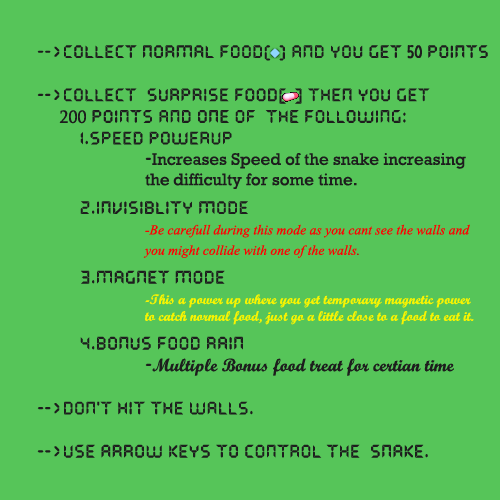
<style>
.page{position:relative;width:500px;height:500px;background:#56c559}
.page>*{position:absolute;margin:0}
.t1{font:14px "ScriptMTBold";color:#f8f400}
.t2{font:18px "QuartzMS";color:#1d1d1d}
.t3{font:18px "SegoeMarker";color:#1d1d1d}
.t4{font:18px "Sylfaen";color:#1d1d1d}
.t5{font:17px "QuartzMS";color:#1d1d1d}
.t6{font:17px "Rockwell";color:#1d1d1d}
.t7{font:17px "Vijaya";color:#ff0000}
.t8{font:17px "Vijaya";color:#c40000}
.t9{font:18px "ScriptMTBold";color:#1d1d1d}
</style>
<div class="page">
<p class="t1" style="left:37px;top:45px;width:451px;height:413px"><span class="t2">--&gt;collect normal food(  ) and you get </span><span class="t3">50</span><span class="t2"> points<br> <br>--&gt;collect  surprise food[  ] then you get <br></span><span class="t4">     200</span><span class="t2"> points and one of  the following:<br> 1.Speed powerup<br>   </span><span class="t5">-</span><span class="t6">Increases Speed of the snake increasing <br>   the difficulty for some time.<br>  </span><span class="t2">2.invisiblity mode<br>   </span><span class="t7">-Be carefull during this mode as you cant see the walls and<br>   you might collide with one of the walls</span><span class="t8">.<br>  </span><span class="t2">3.Magnet mode<br>   </span>-This a power up where you get temporary magnetic power <br>   to catch normal food, just go a little close to a food to eat it.<br>  <span class="t2">4.Bonus food rain<br>   -</span><span class="t9">Multiple Bonus food treat for certian time<br></span><span class="t2">   <br>--&gt;Don't hit the walls.<br><br>--&gt;use arrow keys to control the  snake.</span></p>
</div>
